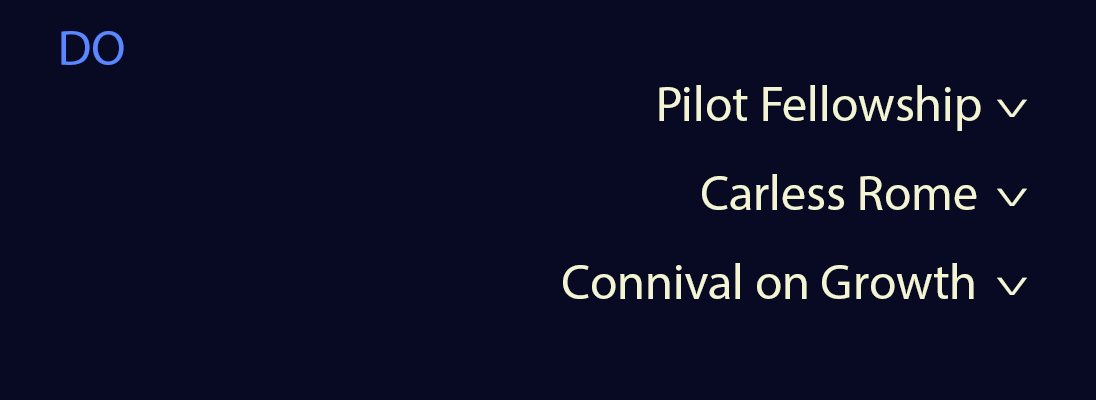
<style>
.page{position:relative;width:1096px;height:400px;background:#080a24}
.page>*{position:absolute;margin:0}
.t1{font:50px "MyriadPro-Regular";color:#5a86ff}
.t2{font:50px "MyriadPro-Regular";color:#f2f4d4}
.t3{font:37.3px "MyriadPro-Regular";color:#f2f4d4;scale:1.69 1}
</style>
<div class="page">
<p class="t1" style="left:61px;top:31px;width:63px;height:34px">DO</p>
<p class="t2" style="left:659px;top:85px;width:322px;height:46px">Pilot Fellowship</p>
<p class="t3" style="left:997px;top:99px;width:30px;height:18px">^</p>
<p class="t2" style="left:702px;top:174px;width:275px;height:36px">Carless Rome</p>
<p class="t3" style="left:997px;top:188px;width:30px;height:18px">^</p>
<p class="t2" style="left:563px;top:263px;width:411px;height:36px">Connival on Growth</p>
<p class="t3" style="left:997px;top:277px;width:30px;height:18px">^</p>
</div>
